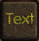
<style>
.page{position:relative;width:39px;height:41px;background:#383020}
.page>*{position:absolute;margin:0}
.t1{font:15.6px "18VAGRoundedMNormal"}
</style>
<div class="page">
<p class="t1" style="left:5px;top:13px;width:30px;height:12px">Text</p>
</div>
